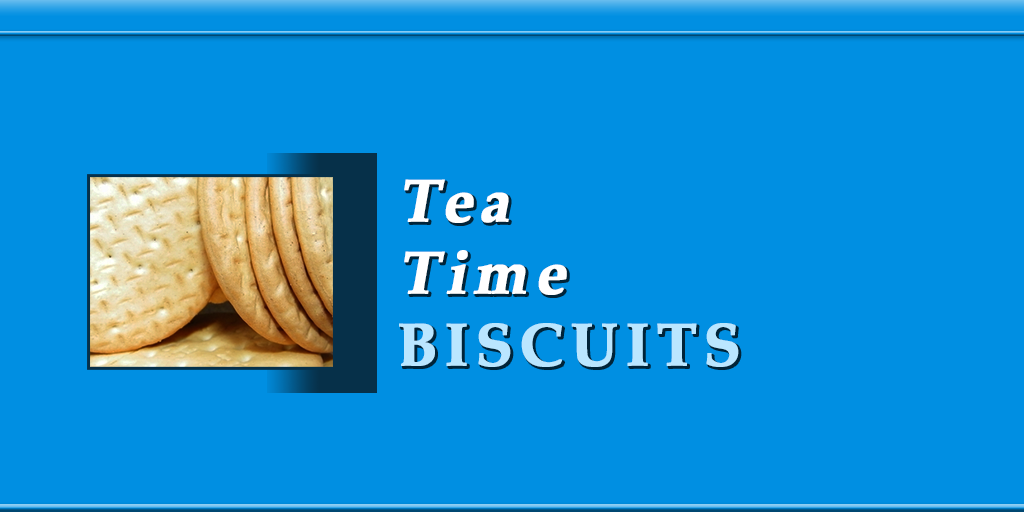
<style>
.page{position:relative;width:1024px;height:512px;background:#008fe2}
.page>*{position:absolute;margin:0}
.t1{font:60px "PalatinoLinotype-Bold";letter-spacing:0.1em;color:#ffffff;font-weight:bold;font-style:italic}
.t2{font:60px "PalatinoLinotype-Bold";letter-spacing:0.1em;color:#bae6ff;font-weight:bold}
</style>
<div class="page">
<p class="t1" style="left:399px;top:179px;width:340px;height:188px">Tea<br>Time<br><span class="t2">BISCUITS</span></p>
</div>
